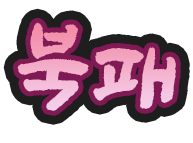
<style>
.page{position:relative;width:193px;height:143px;background:#ffffff}
.page>*{position:absolute;margin:0}
.t1{font:95px "SangSangRockOTF";letter-spacing:0.06em;color:#f4b1cc}
</style>
<div class="page">
<p class="t1" style="left:18px;top:23px;width:157px;height:87px;rotate:7deg">북패</p>
</div>
